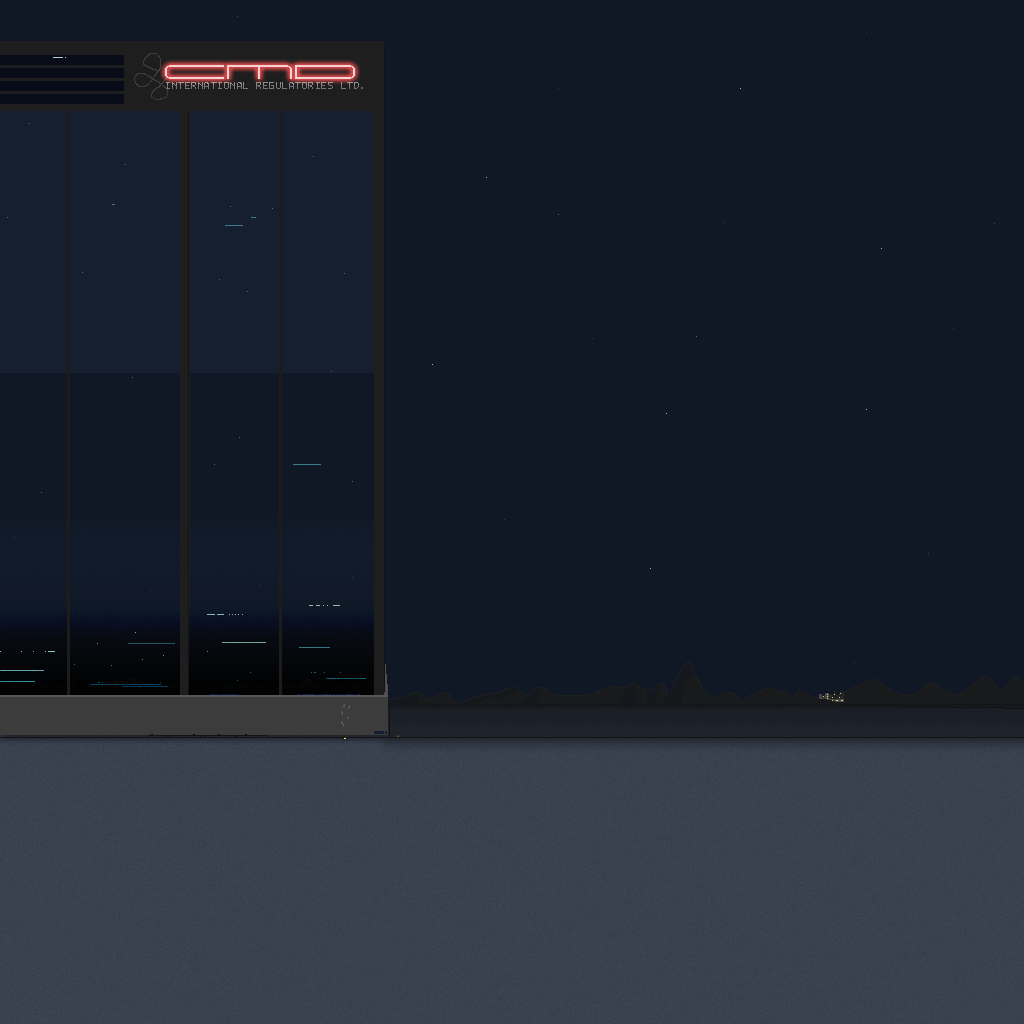
<style>
.page{position:relative;width:1024px;height:1024px;background:#101826}
.page>*{position:absolute;margin:0}
.t1{font:21px "Univox-Regular";color:#f3d3d3}
.t2{font:13px "Px437_ApricotXenC";color:#8f8f8f}
</style>
<div class="page">
<p class="t1" style="left:165px;top:65px;width:190px;height:14px">CMD</p>
<p class="t2" style="left:166px;top:82px;width:197px;height:7px">INTERNATIONAL REGULATORIES LTD.</p>
</div>
